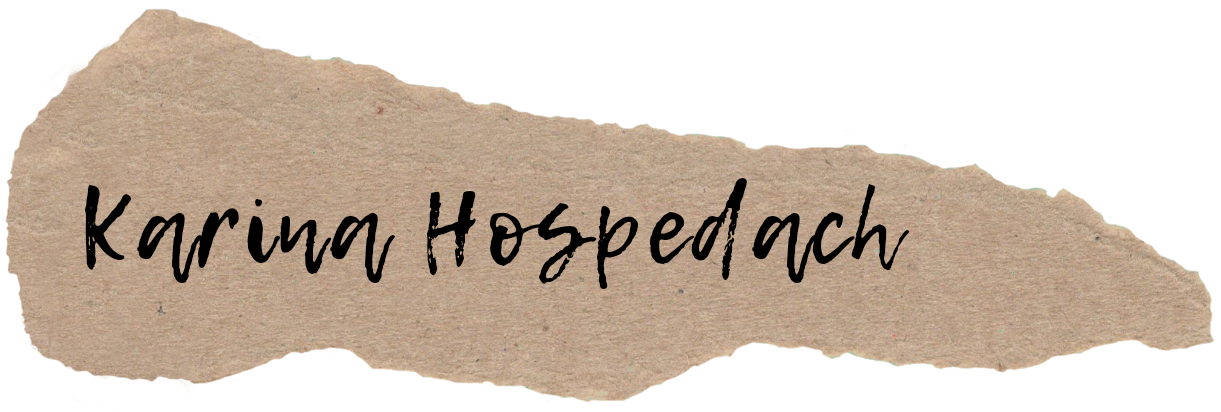
<style>
.page{position:relative;width:1221px;height:412px;background:#ffffff}
.page>*{position:absolute;margin:0}
.t1{font:100.6px "LemonTuesday";letter-spacing:0.05em;color:#000000}
</style>
<div class="page">
<p class="t1" style="left:85px;top:178px;width:825px;height:111px">Karina Hospedach</p>
</div>
